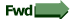
<style>
.page{position:relative;width:70px;height:19px;background:#ffffff}
.page>*{position:absolute;margin:0}
.t1{font:14px "Tahoma-Bold";letter-spacing:-0.05em;color:#003300}
</style>
<div class="page">
<p class="t1" style="left:6px;top:4px;width:27px;height:12px">Fwd</p>
</div>
